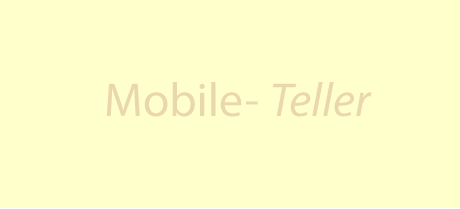
<style>
.page{position:relative;width:460px;height:209px;background:#ffffcc}
.page>*{position:absolute;margin:0}
.t1{font:48px "MyriadPro-Regular";color:#ead7ac}
.t2{font:48px "MyriadPro-It";color:#ead7ac}
</style>
<div class="page">
<p class="t1" style="left:106px;top:82px;width:266px;height:35px">Mobile- <span class="t2">Teller</span></p>
</div>
